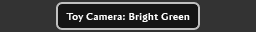
<style>
.page{position:relative;width:256px;height:32px;background:#333333}
.page>*{position:absolute;margin:0}
.t1{font:10px "AmiraParadiso";letter-spacing:0.05em;color:#ffffff}
</style>
<div class="page">
<p class="t1" style="left:66px;top:13px;width:124px;height:9px">Toy Camera: Bright Green</p>
</div>
